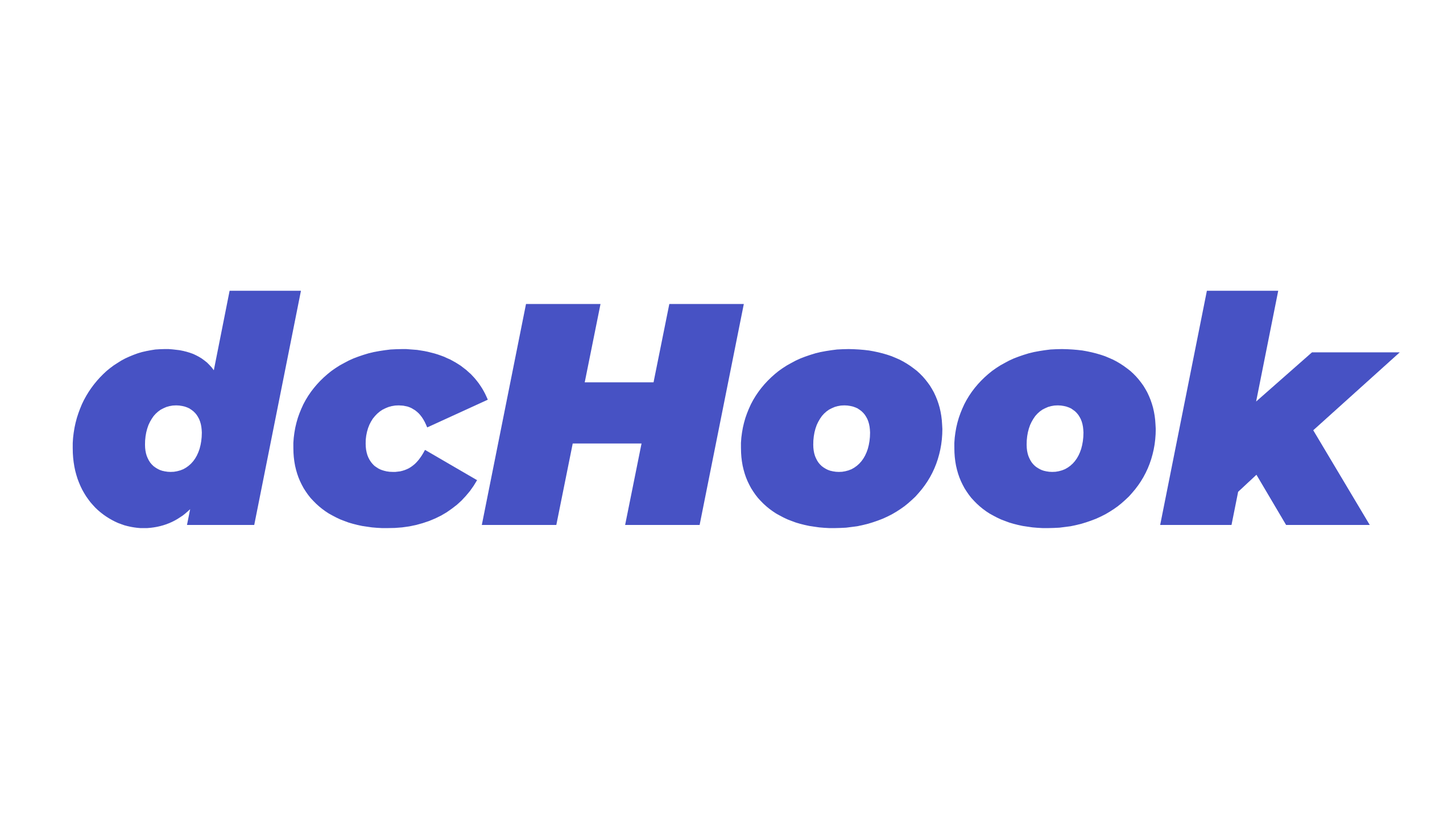
<style>
.page{position:relative;width:1456px;height:819px;background:#ffffff}
.page>*{position:absolute;margin:0}
.t1{font:315.7px "Montserrat-BlackItalic";color:#4752c4}
</style>
<div class="page">
<p class="t1" style="left:72px;top:291px;width:1328px;height:237px">dcHook</p>
</div>
